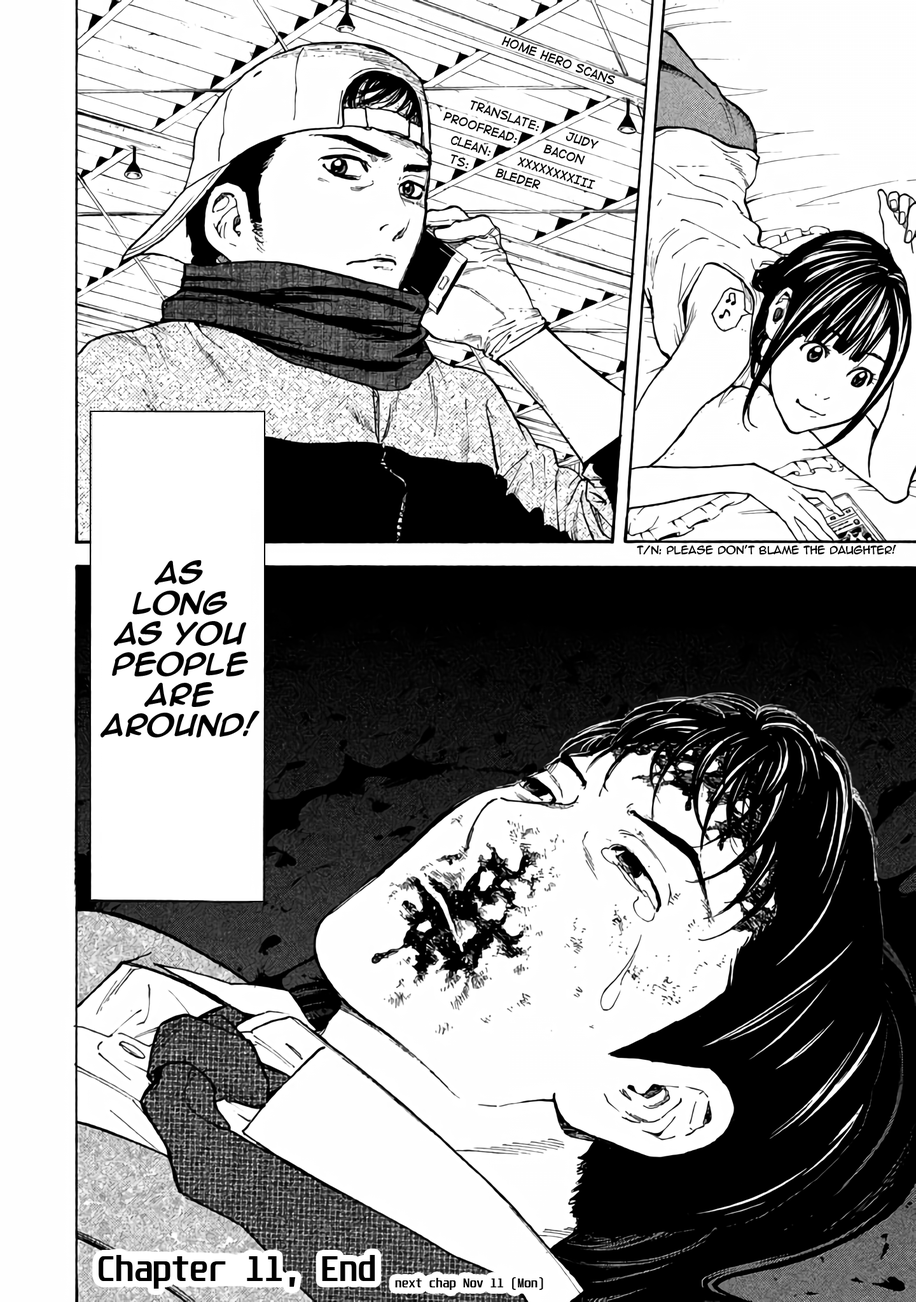
<style>
.page{position:relative;width:916px;height:1302px;background:#ffffff}
.page>*{position:absolute;margin:0}
.t1{font:11.4px "DigitalStrip";color:#000000}
.t2{font:10.2px "AnimeAce2.0BB";color:#000000}
.t3{font:25.4px "AnimeAce2.0BB-Bold";color:#000000}
.t4{font:19.1px "Unispace-Bold";color:#000000}
.t5{font:30.5px "Unispace-Bold";color:#000000}
</style>
<div class="page">
<p class="t1" style="left:501px;top:36px;width:114px;height:49px;rotate:20deg">Home Hero Scans</p>
<p class="t1" style="left:471px;top:100px;width:127px;height:49px;rotate:18deg">Translate:      Judy</p>
<p class="t1" style="left:443px;top:112px;width:142px;height:53px;rotate:18deg">Proofread:      Bacon</p>
<p class="t1" style="left:451px;top:135px;width:144px;height:54px;rotate:18deg">Clean:      XXXXXXXXIII</p>
<p class="t1" style="left:451px;top:154px;width:89px;height:35px;rotate:17deg">TS:      Bleder</p>
<p class="t2" style="left:637px;top:545px;width:259px;height:10px">T/N: Please don’t blame the daughter!</p>
<p class="t3" style="left:100px;top:560px;width:159px;height:178px;text-align:center">As <br>long <br>as you people are around!</p>
<p class="t4" style="left:99px;top:1255px;width:444px;height:35px"><span class="t5">Chapter 11, End </span>next chap Nov 11 (Mon)</p>
</div>
